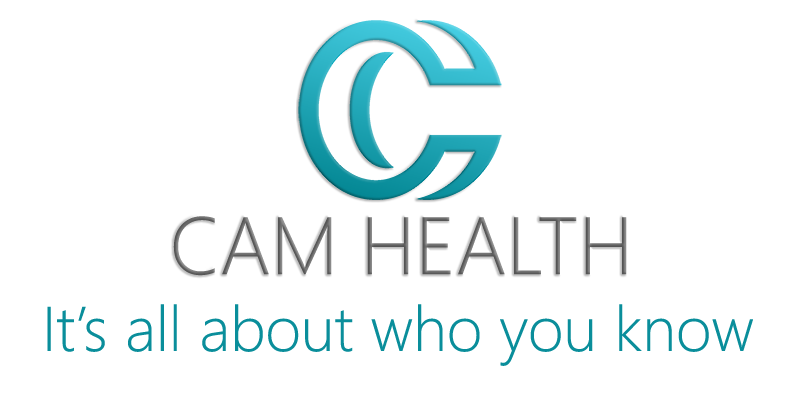
<style>
.page{position:relative;width:800px;height:400px;background:#ffffff}
.page>*{position:absolute;margin:0}
.t1{font:75px "MicrosoftYaHeiLight";color:#707070}
.t2{font:58.3px "MicrosoftYaHeiLight";color:#0a8e9b}
</style>
<div class="page">
<p class="t1" style="left:173px;top:216px;width:454px;height:60px">CAM HEALTH</p>
<p class="t2" style="left:47px;top:304px;width:706px;height:62px">It’s all about who you know</p>
</div>
